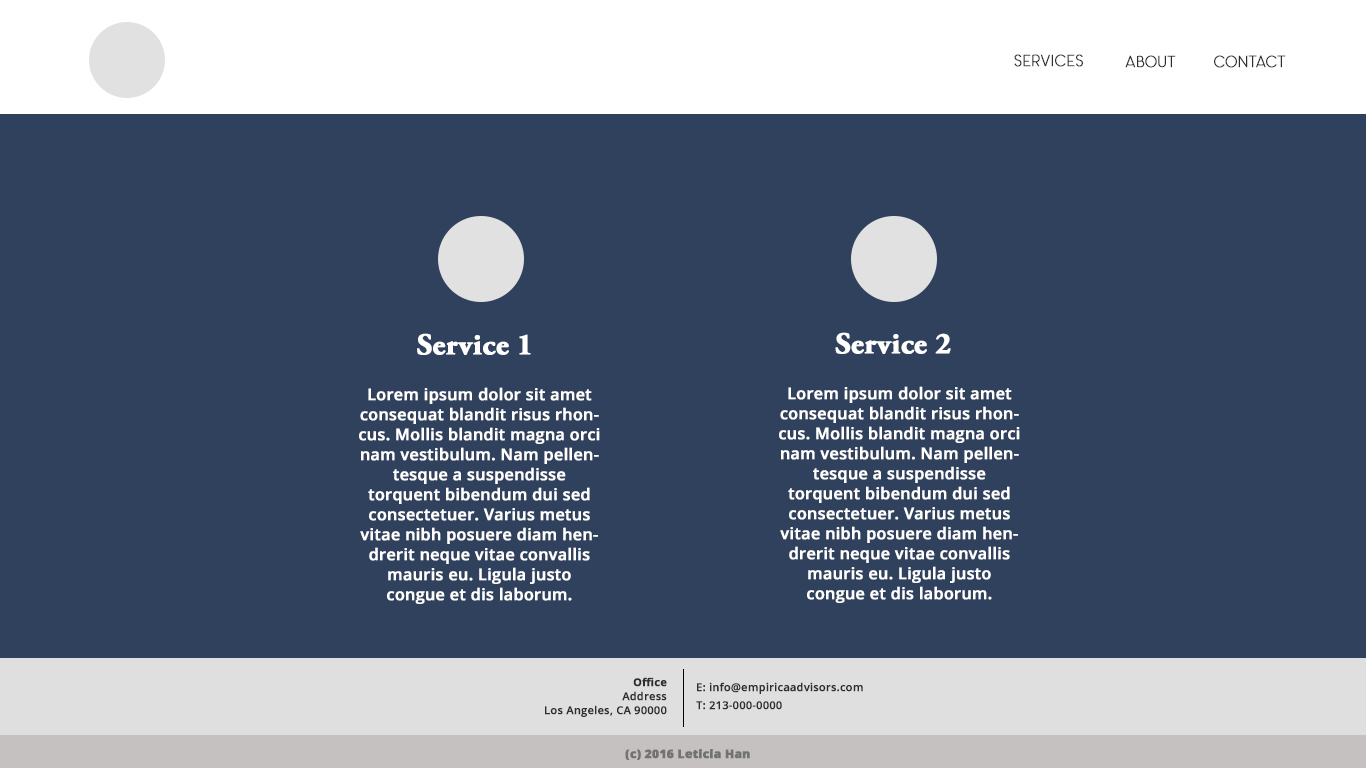
<style>
.page{position:relative;width:1366px;height:768px;background:#30415d}
.page>*{position:absolute;margin:0}
.t1{font:16px "Panama-Light";color:#2e2e2e;font-weight:bold}
.t2{font:16.2px "Panama-Light";color:#2e2e2e;font-weight:bold}
.t3{font:30px "AGaramondPro-Bold";color:#ffffff;font-weight:bold}
.t4{font:16px/20px "OpenSans-Semibold";color:#ffffff;font-weight:bold}
.t5{font:11px/14px "OpenSans-Semibold";color:#2e2e2e;font-weight:bold}
.t6{font:11px/14px "OpenSans-Bold";color:#2e2e2e;font-weight:bold}
.t7{font:11px/18px "OpenSans-Semibold";color:#2e2e2e;font-weight:bold}
.t8{font:12px "OpenSans-Extrabold";color:#737272;font-weight:bold}
</style>
<div class="page">
<p class="t1" style="left:1014px;top:54px;width:69px;height:13px">Services</p>
<p class="t1" style="left:1125px;top:55px;width:51px;height:13px">About</p>
<p class="t2" style="left:1214px;top:55px;width:72px;height:13px">Contact</p>
<p class="t3" style="left:417px;top:333px;width:114px;height:22px">Service 1</p>
<p class="t3" style="left:835px;top:332px;width:116px;height:22px">Service 2</p>
<p class="t4" style="left:359px;top:387px;width:241px;height:217px;text-align:center">Lorem ipsum dolor sit amet consequat blandit risus rhoncus. Mollis blandit magna orci nam vestibulum. Nam pellentesque a suspendisse torquent bibendum dui sed consectetuer. Varius metus vitae nibh posuere diam hendrerit neque vitae convallis mauris eu. Ligula justo congue et dis laborum.</p>
<p class="t4" style="left:779px;top:386px;width:241px;height:217px;text-align:center">Lorem ipsum dolor sit amet consequat blandit risus rhoncus. Mollis blandit magna orci nam vestibulum. Nam pellentesque a suspendisse torquent bibendum dui sed consectetuer. Varius metus vitae nibh posuere diam hendrerit neque vitae convallis mauris eu. Ligula justo congue et dis laborum.</p>
<p class="t5" style="left:545px;top:677px;width:122px;height:40px;text-align:right"><span class="t6">Office<br></span>Address<br>Los Angeles, CA 90000</p>
<p class="t7" style="left:696px;top:682px;width:167px;height:28px">E: info@empiricaadvisors.com<br>T: 213-000-0000</p>
<p class="t8" style="left:625px;top:749px;width:125px;height:11px">(c) 2016 Leticia Han</p>
</div>
